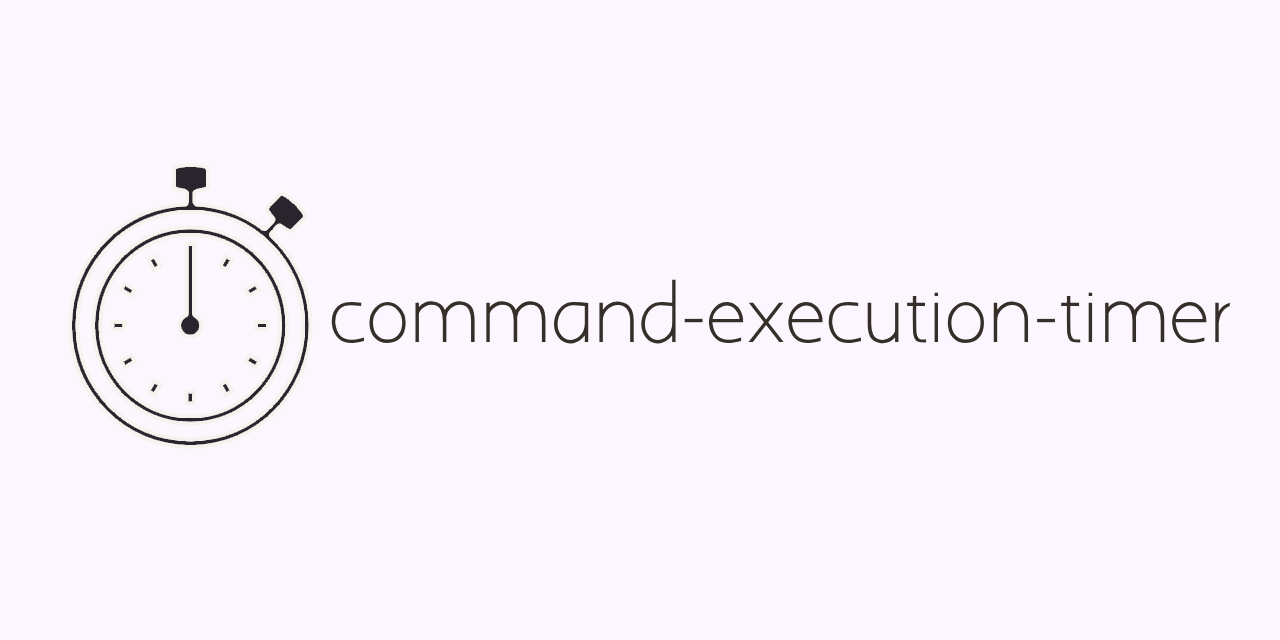
<style>
.page{position:relative;width:1280px;height:640px;background:#fcf6ff}
.page>*{position:absolute;margin:0}
.t1{font:68px "AaarghNormal";color:#362f29}
</style>
<div class="page">
<p class="t1" style="left:331px;top:279px;width:899px;height:65px">command-execution-timer</p>
</div>
